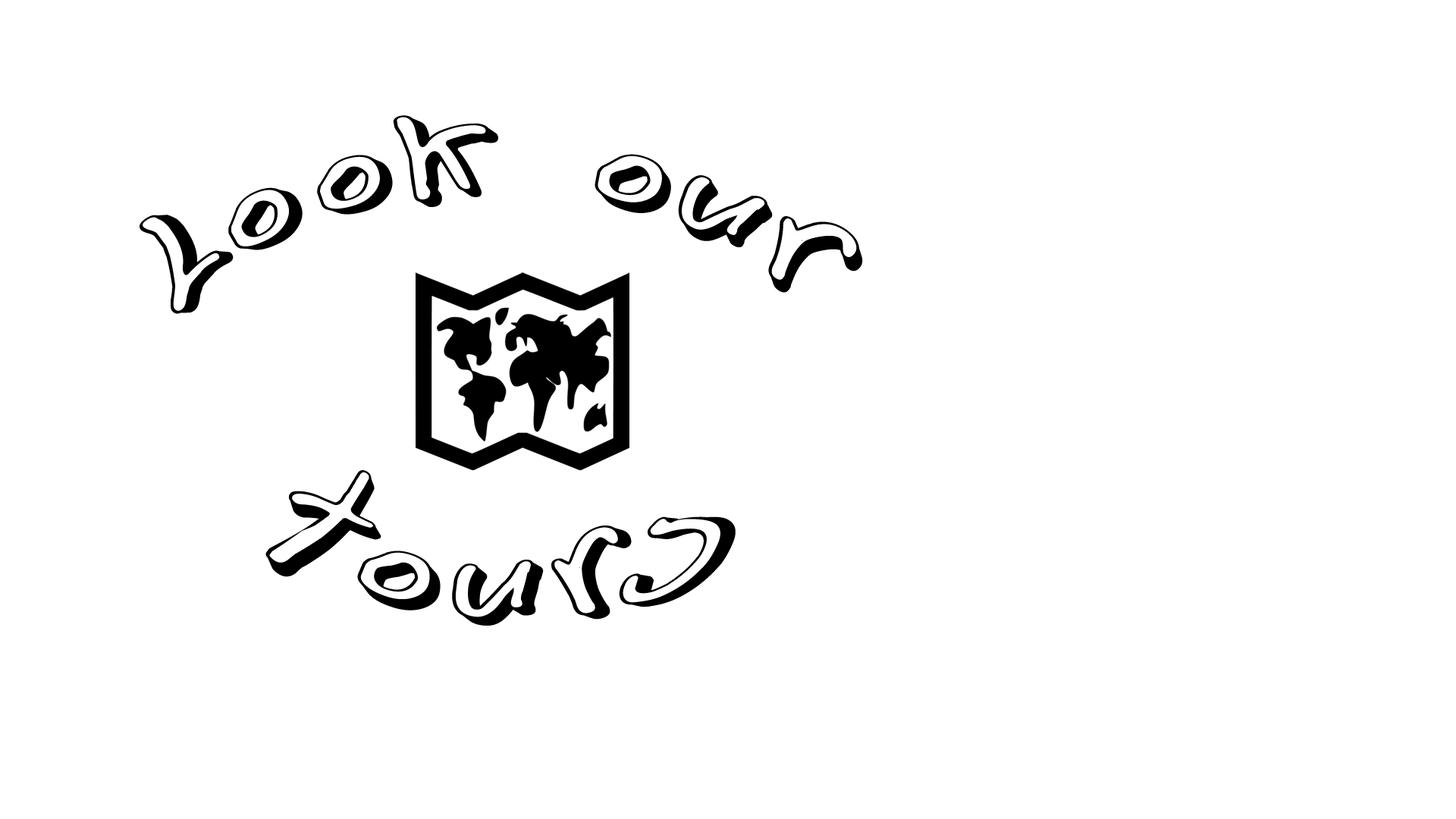
<style>
.page{position:relative;width:1456px;height:819px;background:#ffffff}
.page>*{position:absolute;margin:0}
.t1{font:136.5px "BNFontBoy3D";color:#000000}
</style>
<div class="page">
<p class="t1" style="left:140px;top:115px;width:723px;height:199px">Look our</p>
<p class="t1" style="left:265px;top:470px;width:471px;height:156px">tours</p>
</div>
